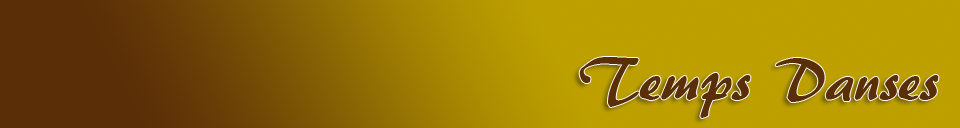
<style>
.page{position:relative;width:960px;height:128px;background:#bda000}
.page>*{position:absolute;margin:0}
.t1{font:60px "ARBERKLEY";color:#5a2e07}
</style>
<div class="page">
<p class="t1" style="left:579px;top:57px;width:360px;height:61px">Temps Danses</p>
</div>
